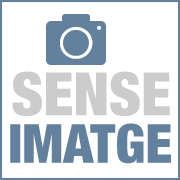
<style>
.page{position:relative;width:180px;height:180px;background:#ffffff}
.page>*{position:absolute;margin:0}
.t1{font:60px "HelveticaNeue-CondensedBlack";color:#cccccc}
.t2{font:54px "HelveticaNeue-CondensedBlack";color:#63819c}
.t3{font:36px "HelveticaNeue-CondensedBlack";color:#63819c}
</style>
<div class="page">
<p class="t1" style="left:12px;top:71px;width:158px;height:45px">SENSE</p>
<p class="t2" style="left:10px;top:123px;width:161px;height:41px"><span class="t3"> </span>IMATGE</p>
</div>
